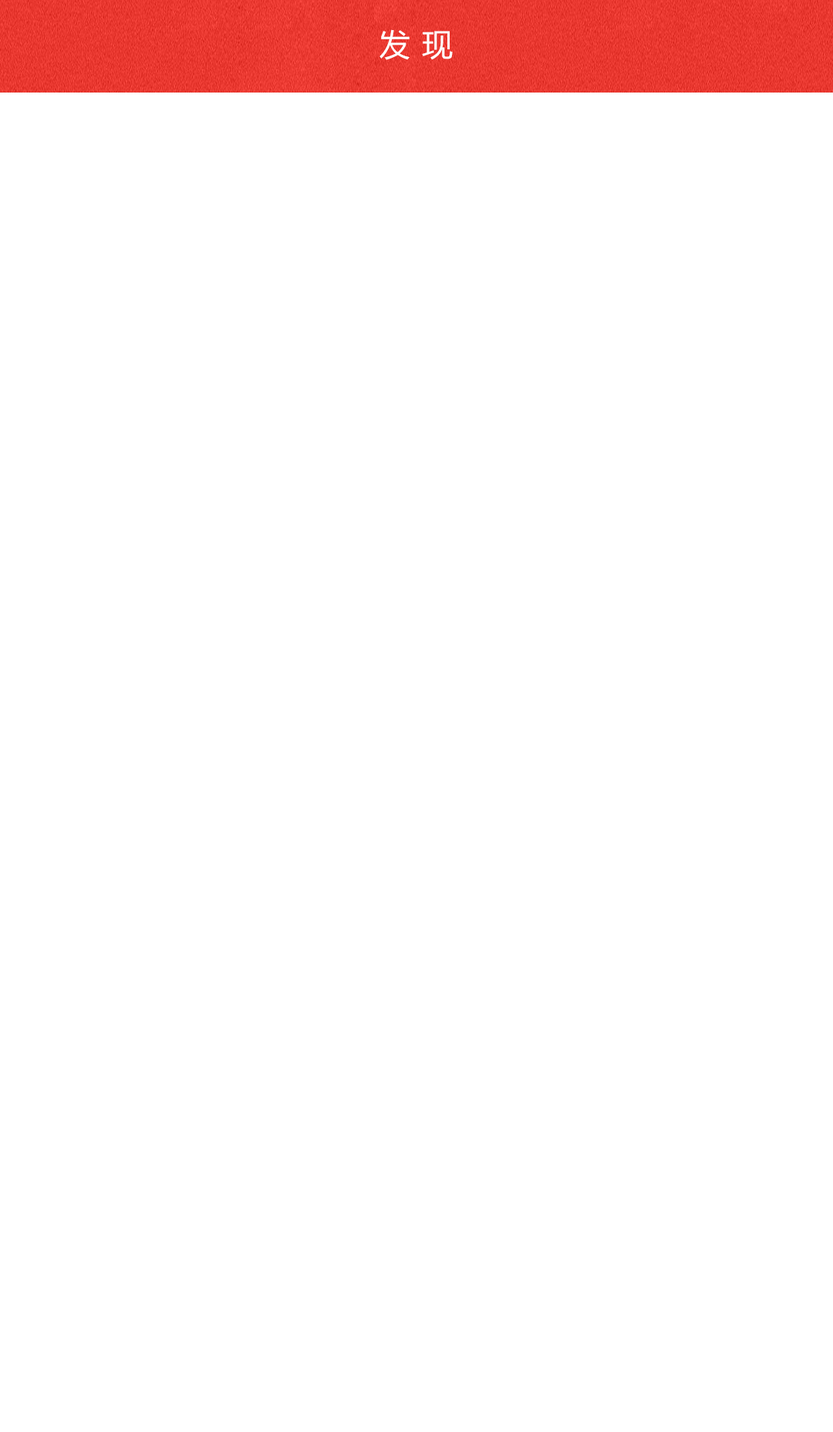
<style>
.page{position:relative;width:833px;height:1432px;background:#ffffff}
.page>*{position:absolute;margin:0}
.t1{font:30.8px "MicrosoftYaHei";letter-spacing:0.38em;color:#ffffff}
</style>
<div class="page">
<p class="t1" style="left:379px;top:29px;width:74px;height:31px">发现</p>
</div>
